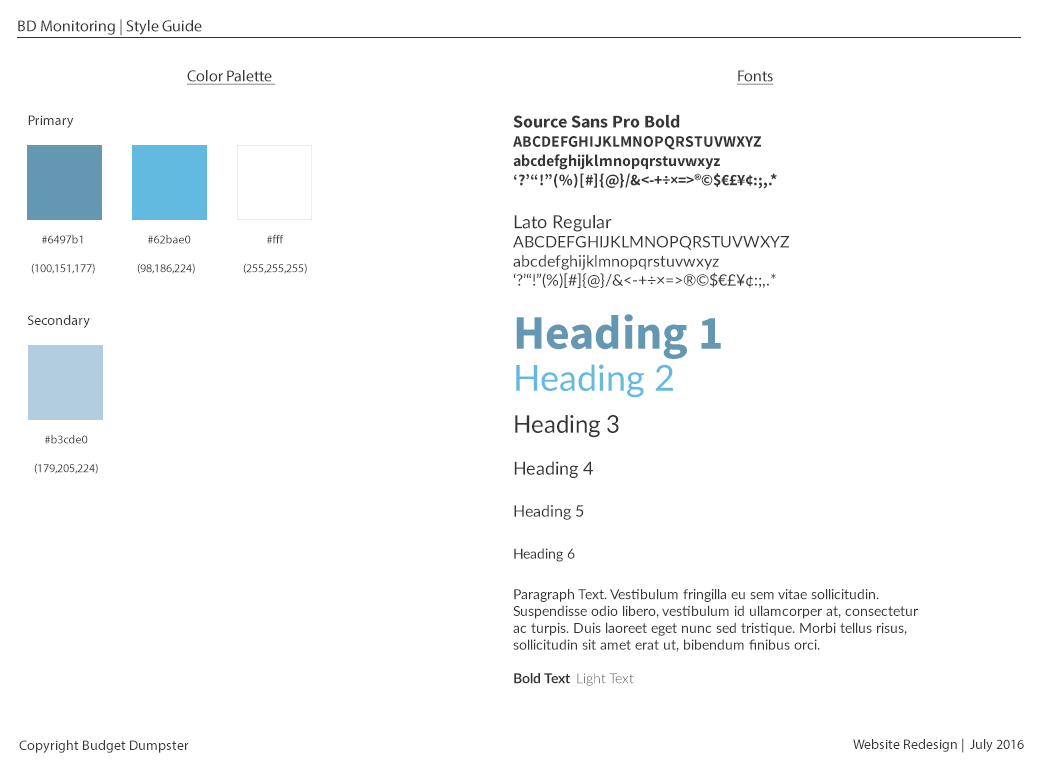
<style>
.page{position:relative;width:1040px;height:770px;background:#ffffff}
.page>*{position:absolute;margin:0}
.t1{font:16px "MyriadPro-Regular";color:#363636}
.t2{font:16px "MyriadPro-Regular";color:#363636;text-decoration:underline}
.t3{font:14px "MyriadPro-Regular";color:#363636}
.t4{font:16px "SourceSansPro-Bold";color:#363636}
.t5{font:18px "SourceSansPro-Bold";color:#363636}
.t6{font:16px "Lato-Regular";color:#363636}
.t7{font:18px "Lato-Regular";color:#363636}
.t8{font:12px "MyriadPro-Regular";color:#363636}
.t9{font:48px/36px "SourceSansPro-Bold";color:#6497b1}
.t10{font:36px/42px "Lato-Regular";color:#62bae0}
.t11{font:24px/42px "Lato-Regular";color:#363636}
.t12{font:18px/42px "Lato-Regular";color:#363636}
.t13{font:16px/42px "Lato-Regular";color:#363636}
.t14{font:14px/42px "Lato-Regular";color:#363636}
.t15{font:14px "Lato-Regular";color:#363636}
.t16{font:14px "Lato-Bold";color:#363636}
.t17{font:14px "Lato-Light";color:#363636}
</style>
<div class="page">
<p class="t1" style="left:18px;top:19px;width:184px;height:17px">BD Monitoring | Style Guide</p>
<p class="t2" style="left:187px;top:70px;width:89px;height:15px">Color Palette</p>
<p class="t2" style="left:737px;top:70px;width:37px;height:15px">Fonts</p>
<p class="t3" style="left:28px;top:115px;width:46px;height:13px">Primary</p>
<p class="t4" style="left:513px;top:114px;width:264px;height:75px"><span class="t5">Source Sans Pro Bold<br></span>ABCDEFGHIJKLMNOPQRSTUVWXYZ<br>abcdefghijklmnopqrstuvwxyz<br>‘?’“!”(%)[#]{@}/&amp;&lt;-+÷×=&gt;®©$€£¥¢:;,.*</p>
<p class="t6" style="left:513px;top:215px;width:276px;height:73px"><span class="t7">Lato Regular<br></span>ABCDEFGHIJKLMNOPQRSTUVWXYZ<br>abcdefghijklmnopqrstuvwxyz<br>‘?’“!”(%)[#]{@}/&amp;&lt;-+÷×=&gt;®©$€£¥¢:;,.*</p>
<p class="t8" style="left:31px;top:234px;width:64px;height:40px;text-align:center">#6497b1<br><br>(100,151,177)</p>
<p class="t8" style="left:137px;top:234px;width:58px;height:40px;text-align:center">#62bae0<br><br>(98,186,224)</p>
<p class="t8" style="left:243px;top:234px;width:64px;height:40px;text-align:center">#fff<br><br>(255,255,255)</p>
<p class="t3" style="left:27px;top:315px;width:63px;height:13px">Secondary</p>
<p class="t9" style="left:514px;top:314px;width:207px;height:248px">Heading 1<br><span class="t10">Heading 2<br></span><span class="t11">Heading 3<br></span><span class="t12">Heading 4<br></span><span class="t13">Heading 5<br></span><span class="t14">Heading 6</span></p>
<p class="t8" style="left:34px;top:434px;width:64px;height:40px;text-align:center">#b3cde0<br><br>(179,205,224)</p>
<p class="t15" style="left:513px;top:589px;width:405px;height:97px">Paragraph Text. Vestibulum fringilla eu sem vitae sollicitudin. Suspendisse odio libero, vestibulum id ullamcorper at, consectetur ac turpis. Duis laoreet eget nunc sed tristique. Morbi tellus risus, sollicitudin sit amet erat ut, bibendum finibus orci. <span class="t16"><br><br>Bold Text  </span><span class="t17">Light Text</span></p>
<p class="t3" style="left:19px;top:740px;width:170px;height:13px">Copyright Budget Dumpster</p>
<p class="t3" style="left:853px;top:738px;width:171px;height:15px">Website Redesign |  July 2016</p>
</div>
